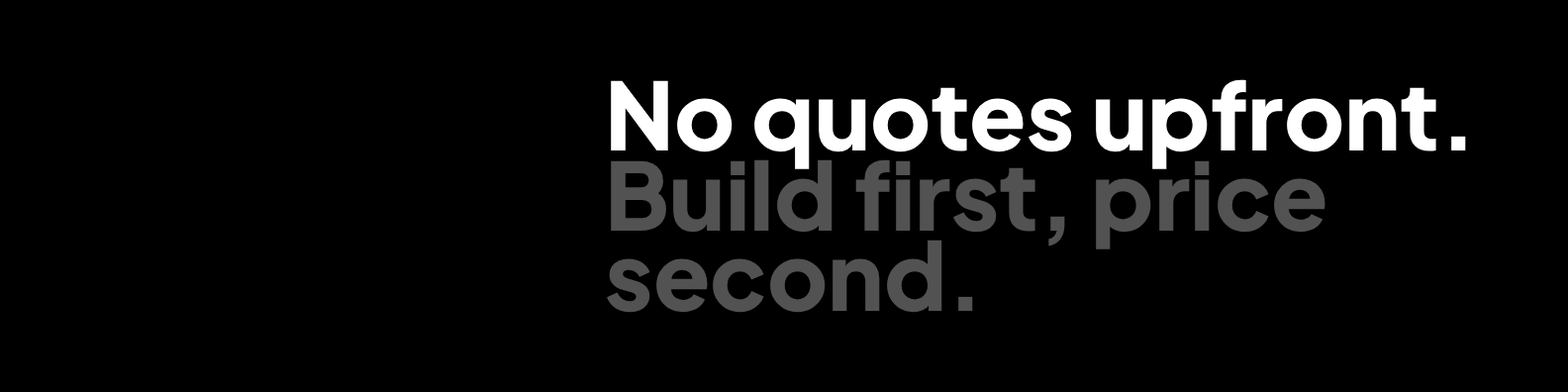
<style>
.page{position:relative;width:1568px;height:392px;background:#000000}
.page>*{position:absolute;margin:0}
.t1{font:93.3px/79.8px "PlusJakartaSans-ExtraBold";color:#525252}
.t2{font:93.3px/79.8px "PlusJakartaSans-ExtraBold";color:#ffffff}
</style>
<div class="page">
<p class="t1" style="left:607px;top:79px;width:859px;height:234px"><span class="t2">No quotes upfront.<br></span>Build first, price <br>second.</p>
</div>
